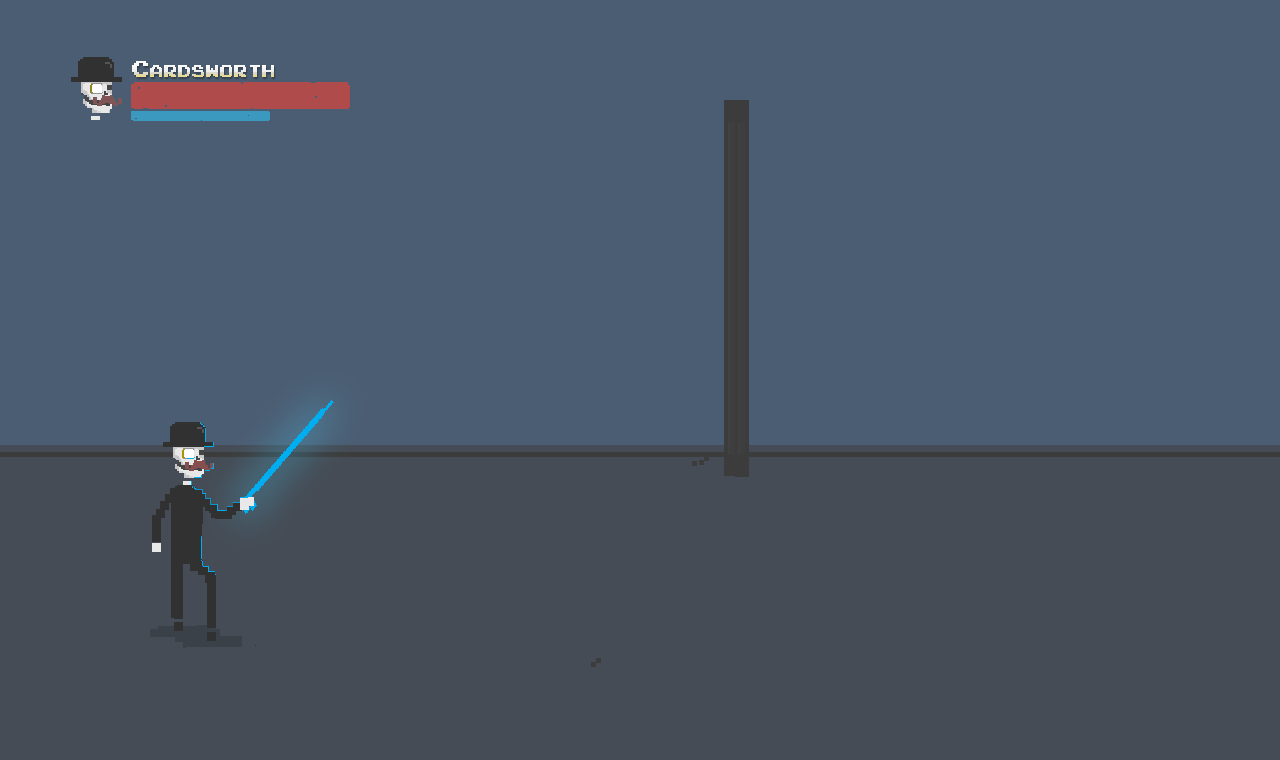
<style>
.page{position:relative;width:1280px;height:760px;background:#4b5d72}
.page>*{position:absolute;margin:0}
.t1{font:14px "PressStart2P";text-transform:uppercase}
.t2{font:18px "PressStart2P";text-transform:uppercase}
</style>
<div class="page">
<p class="t1" style="left:132px;top:61px;width:142px;height:16px"><span class="t2">C</span>ardsworth</p>
</div>
